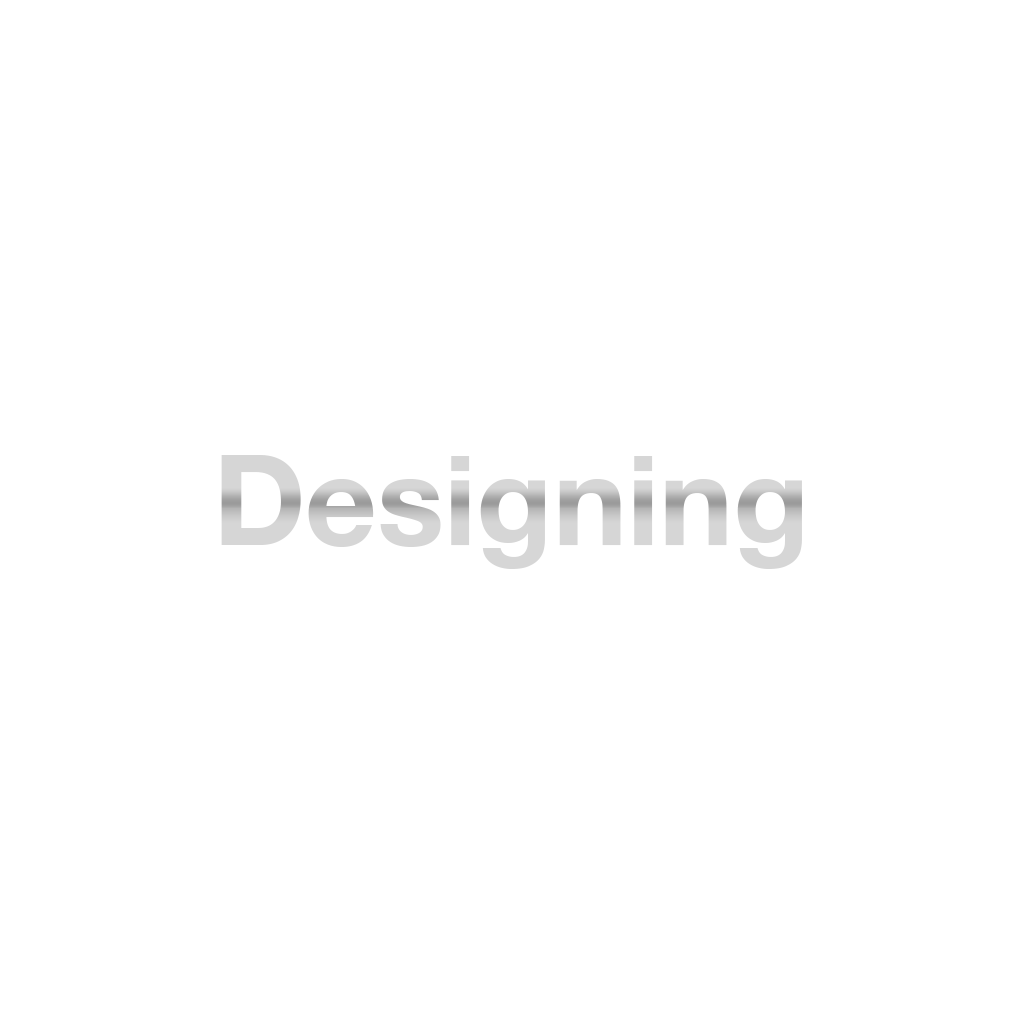
<style>
.page{position:relative;width:1024px;height:1024px;background:#ffffff}
.page>*{position:absolute;margin:0}
.t1{font:125px "HelveticaNeue-Bold";color:#d6d6d6}
</style>
<div class="page">
<p class="t1" style="left:221px;top:455px;width:581px;height:114px">Designing</p>
</div>
